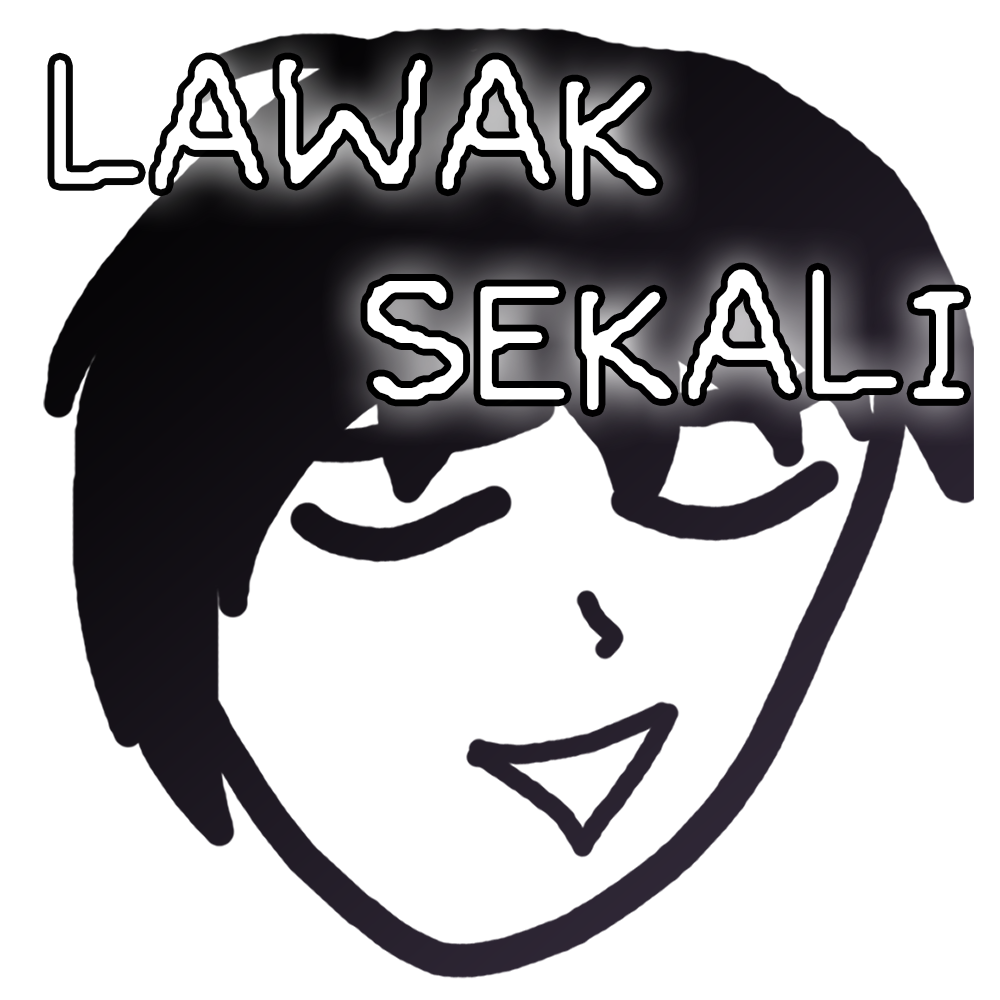
<style>
.page{position:relative;width:1000px;height:1000px;background:#ffffff}
.page>*{position:absolute;margin:0}
.t1{font:274.6px/209.8px "OMORI_GAME2";color:#ffffff}
</style>
<div class="page">
<p class="t1" style="left:54px;top:59px;width:911px;height:352px">LAWAK<br>    SEKALI</p>
</div>
